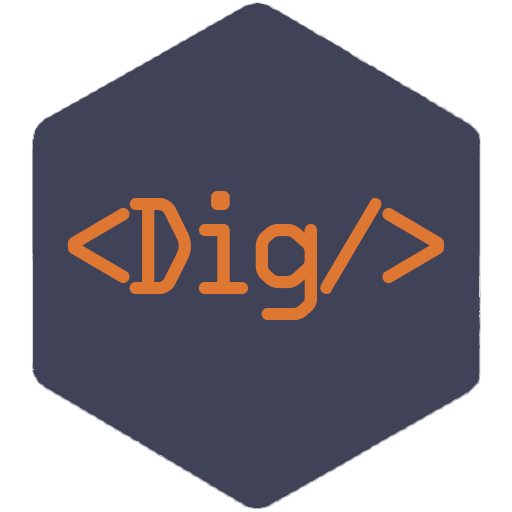
<style>
.page{position:relative;width:512px;height:512px;background:#404258}
.page>*{position:absolute;margin:0}
.t1{font:148px "OCRAExtended";letter-spacing:-0.18em;color:#dd7732}
</style>
<div class="page">
<p class="t1" style="left:67px;top:191px;width:377px;height:129px">&lt;Dig/&gt;</p>
</div>
